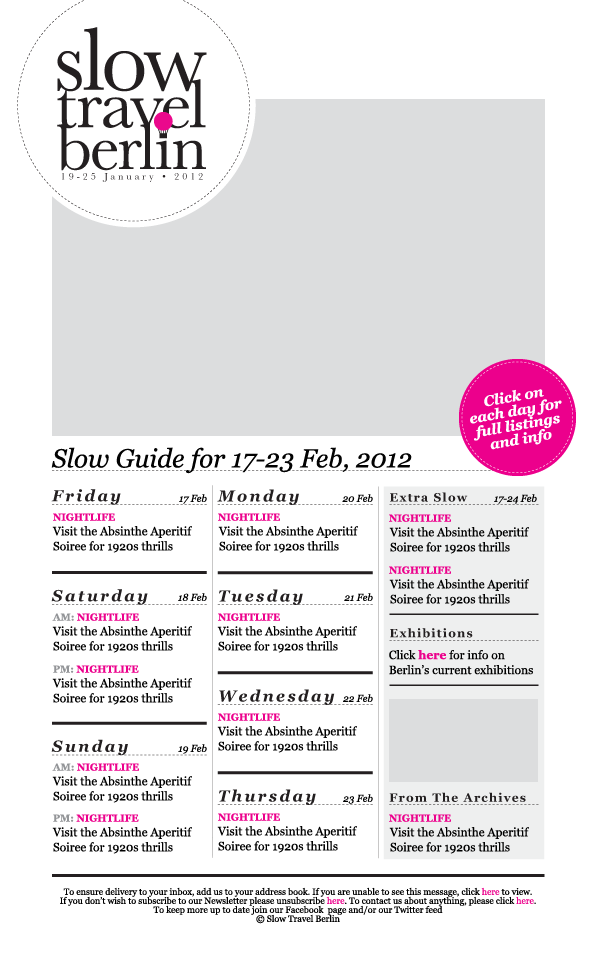
<style>
.page{position:relative;width:600px;height:970px;background:#ffffff}
.page>*{position:absolute;margin:0}
.t1{font:26px "Georgia-Italic";color:#020202}
.t2{font:10px "Georgia-Italic";color:#000000}
.t3{font:10px "Georgia-Bold";color:#ec008c;text-transform:uppercase}
.t4{font:12px/15px "Georgia";color:#010101}
.t5{font:10px "Georgia-Bold";color:#939598;text-transform:uppercase}
.t6{font:12px/15px "Georgia-Bold";color:#ec008c}
.t7{font:9px/9px "Georgia";color:#000000}
.t8{font:9px/9px "Georgia";color:#ec008c}
</style>
<div class="page">
<p class="t1" style="left:51px;top:447px;width:361px;height:27px">Slow Guide for 17-23 Feb, 2012</p>
<p class="t2" style="left:179px;top:494px;width:28px;height:10px">17 Feb</p>
<p class="t2" style="left:342px;top:494px;width:31px;height:8px">20 Feb</p>
<p class="t2" style="left:494px;top:494px;width:43px;height:10px">17-24 Feb</p>
<p class="t3" style="left:53px;top:513px;width:62px;height:8px">Nightlife</p>
<p class="t3" style="left:218px;top:513px;width:62px;height:8px">Nightlife</p>
<p class="t3" style="left:389px;top:514px;width:62px;height:8px">Nightlife</p>
<p class="t4" style="left:52px;top:526px;width:140px;height:27px">Visit the Absinthe Aperitif Soiree for 1920s thrills</p>
<p class="t4" style="left:218px;top:526px;width:140px;height:27px">Visit the Absinthe Aperitif Soiree for 1920s thrills</p>
<p class="t4" style="left:389px;top:527px;width:140px;height:27px">Visit the Absinthe Aperitif Soiree for 1920s thrills</p>
<p class="t3" style="left:389px;top:566px;width:62px;height:8px">Nightlife</p>
<p class="t4" style="left:389px;top:579px;width:140px;height:27px">Visit the Absinthe Aperitif Soiree for 1920s thrills</p>
<p class="t2" style="left:178px;top:593px;width:29px;height:8px">18 Feb</p>
<p class="t2" style="left:344px;top:593px;width:29px;height:8px">21 Feb</p>
<p class="t3" style="left:52px;top:613px;width:87px;height:8px"><span class="t5">AM:</span> Nightlife</p>
<p class="t3" style="left:218px;top:613px;width:62px;height:8px">Nightlife</p>
<p class="t4" style="left:52px;top:626px;width:140px;height:27px">Visit the Absinthe Aperitif Soiree for 1920s thrills</p>
<p class="t4" style="left:217px;top:626px;width:140px;height:27px">Visit the Absinthe Aperitif Soiree for 1920s thrills</p>
<p class="t4" style="left:389px;top:650px;width:144px;height:25px">Click <span class="t6">here</span> for info on Berlin’s current exhibitions</p>
<p class="t3" style="left:53px;top:665px;width:86px;height:8px"><span class="t5">PM:</span> Nightlife</p>
<p class="t4" style="left:52px;top:678px;width:140px;height:27px">Visit the Absinthe Aperitif Soiree for 1920s thrills</p>
<p class="t2" style="left:343px;top:694px;width:30px;height:8px">22 Feb</p>
<p class="t3" style="left:218px;top:713px;width:62px;height:8px">Nightlife</p>
<p class="t4" style="left:217px;top:726px;width:140px;height:27px">Visit the Absinthe Aperitif Soiree for 1920s thrills</p>
<p class="t2" style="left:178px;top:744px;width:29px;height:10px">19 Feb</p>
<p class="t3" style="left:52px;top:763px;width:87px;height:8px"><span class="t5">AM: </span>Nightlife</p>
<p class="t4" style="left:52px;top:776px;width:140px;height:27px">Visit the Absinthe Aperitif Soiree for 1920s thrills</p>
<p class="t2" style="left:343px;top:794px;width:30px;height:10px">23 Feb</p>
<p class="t3" style="left:53px;top:814px;width:86px;height:8px"><span class="t5">PM:</span> Nightlife</p>
<p class="t3" style="left:218px;top:813px;width:62px;height:8px">Nightlife</p>
<p class="t3" style="left:389px;top:814px;width:62px;height:8px">Nightlife</p>
<p class="t4" style="left:52px;top:827px;width:140px;height:27px">Visit the Absinthe Aperitif Soiree for 1920s thrills</p>
<p class="t4" style="left:217px;top:826px;width:140px;height:27px">Visit the Absinthe Aperitif Soiree for 1920s thrills</p>
<p class="t4" style="left:389px;top:827px;width:140px;height:27px">Visit the Absinthe Aperitif Soiree for 1920s thrills</p>
<p class="t7" style="left:60px;top:887px;width:476px;height:37px;text-align:center">To ensure delivery to your inbox, add us to your address book. If you are unable to see this message, click <span class="t8">here</span> to view.<br>If you don’t wish to subscribe to our Newsletter please unsubscribe <span class="t8">here</span>. To contact us about anything, please click <span class="t8">here</span>.  <br>To keep more up to date join our Facebook  page and/or our Twitter feed <br>© Slow Travel Berlin</p>
</div>
